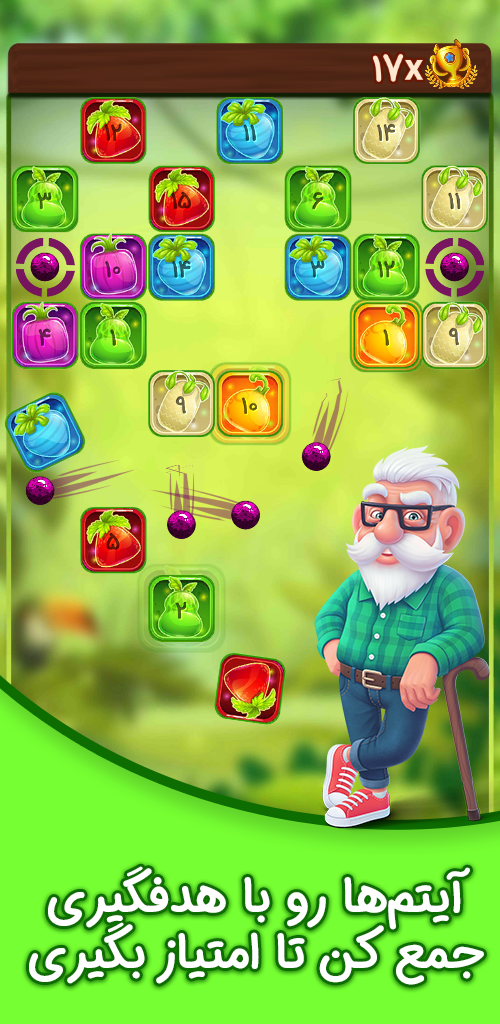
<style>
.page{position:relative;width:500px;height:1024px}
.page>*{position:absolute;margin:0}
.t1{font:48px "IRANSansDNFaNum-Bold";color:#ffffff}
</style>
<div class="page">
<p class="t1" style="left:29px;top:866px;width:455px;height:119px;text-align:center">آیتم‌ها رو با هدفگیری<br>جمع کن تا امتیاز بگیری</p>
</div>
